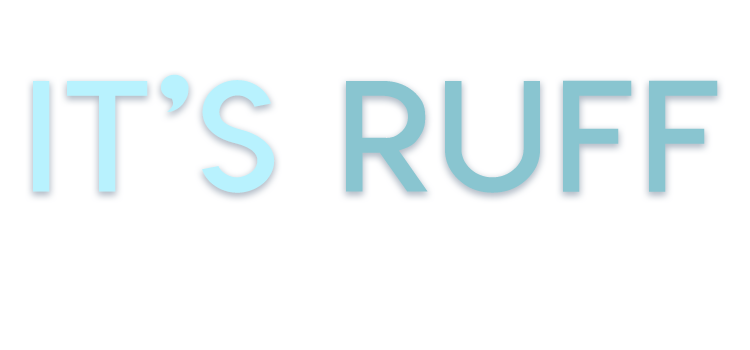
<style>
.page{position:relative;width:750px;height:350px;background:#ffffff}
.page>*{position:absolute;margin:0}
.t1{font:151.8px "LemonMilklight";letter-spacing:0.04em;color:#b8f2fe;scale:1.09 1}
.t2{font:151.8px "LemonMilklight";letter-spacing:0.04em;color:#89c5d0;scale:1.09 1}
</style>
<div class="page">
<p class="t1" style="left:33px;top:74px;width:685px;height:119px">it’s <span class="t2">ruff</span></p>
</div>
